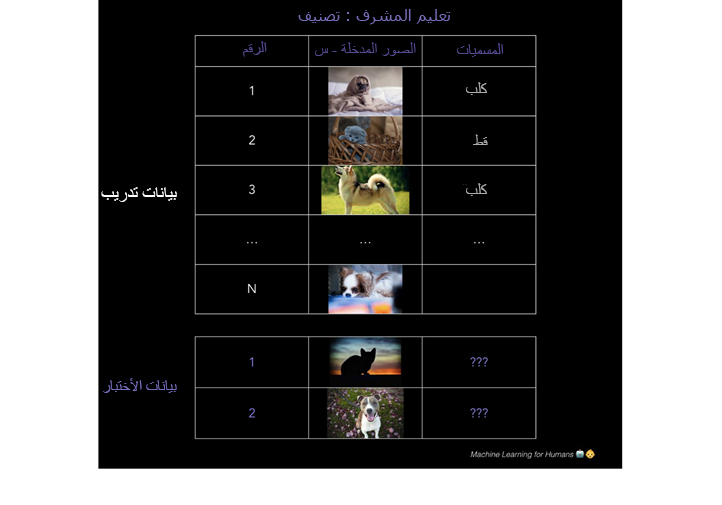
<style>
.page{position:relative;width:722px;height:505px;background:#000000}
.page>*{position:absolute;margin:0}
.t1{font:12px "TimesNewRomanPSMT";color:#534a8f}
.t2{font:12px "TimesNewRomanPSMT";color:#ababab}
.t3{font:17.9px "TimesNewRomanPSMT";color:#ffffff}
.t4{font:16px "TimesNewRomanPSMT";color:#766eb8}
</style>
<div class="page">
<p class="t1" style="left:243px;top:41px;width:24px;height:16px">الرقم</p>
<p class="t1" style="left:457px;top:43px;width:46px;height:14px">المسميات</p>
<p class="t2" style="left:466px;top:82px;width:21px;height:13px">كلب</p>
<p class="t2" style="left:473px;top:134px;width:15px;height:11px">قط</p>
<p class="t2" style="left:466px;top:183px;width:21px;height:13px">كلب</p>
<p class="t3" style="left:101px;top:187px;width:76px;height:15px">بيانات تدريب</p>
<p class="t4" style="left:102px;top:378px;width:75px;height:15px">بيانات الأختبار</p>
</div>
